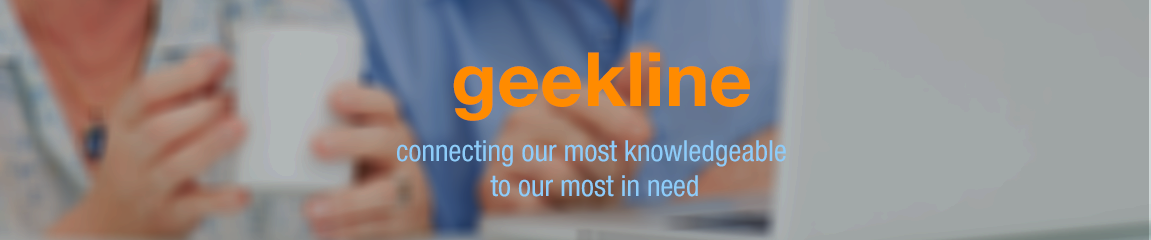
<style>
.page{position:relative;width:1151px;height:240px}
.page>*{position:absolute;margin:0}
.t1{font:75px "HelveticaNeueLTPro-Bd";color:#ff8b00}
.t2{font:29.2px "HelveticaNeueLTPro-Cn";color:#8dccf9}
</style>
<div class="page">
<p class="t1" style="left:453px;top:52px;width:297px;height:69px">geekline</p>
<p class="t2" style="left:397px;top:140px;width:389px;height:57px;text-align:center">connecting our most knowledgeable <br>to our most in need</p>
</div>
